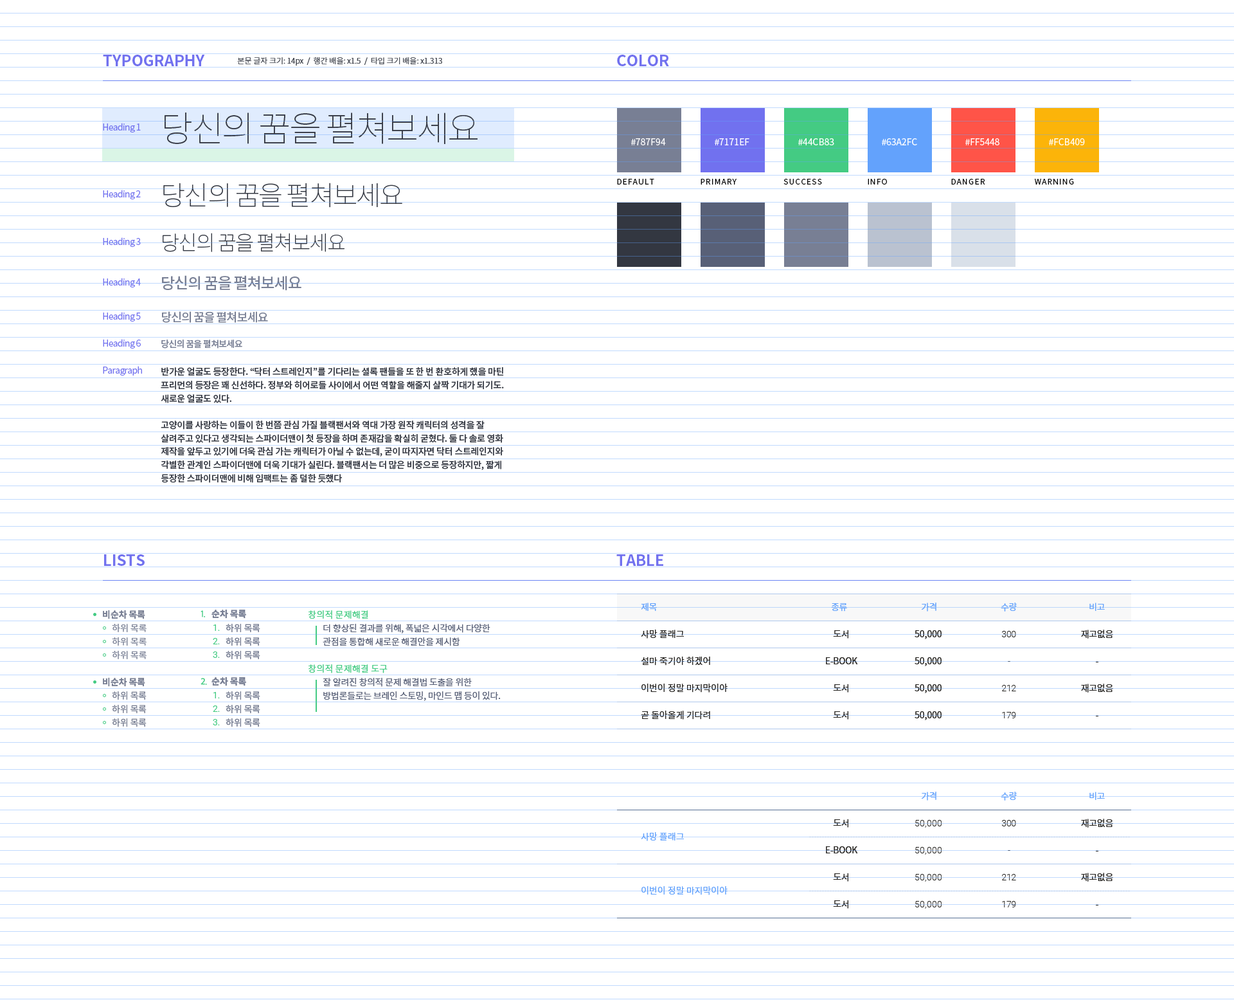
<style>
.page{position:relative;width:1234px;height:1000px;background:#ffffff}
.page>*{position:absolute;margin:0}
.t1{font:15.4px "SourceHanSansKR-Bold";letter-spacing:-0.01em;color:#7171ef}
.t2{font:7.7px "NotoSansCJKkr-Light";color:#333741}
.t3{font:35.1px "NotoSansCJKkr-Thin";letter-spacing:-0.05em;color:#333741}
.t4{font:9px "SourceHanSansKR-Regular";letter-spacing:-0.05em;color:#7171ef}
.t5{font:9px "NotoSansCJKkr-Regular";color:#ffffff;text-transform:uppercase}
.t6{font:26.8px "NotoSansCJKkr-Thin";letter-spacing:-0.05em;color:#333741}
.t7{font:7.7px "SourceHanSansKR-Regular";letter-spacing:0.1em;color:#000000}
.t8{font:7.7px "SourceHanSansKR-Regular";letter-spacing:0.1em;color:#000000;text-transform:uppercase}
.t9{font:20.4px "NotoSansCJKkr-Thin";letter-spacing:-0.05em;color:#333741}
.t10{font:15.5px "NotoSansCJKkr-Medium";letter-spacing:-0.05em;color:#787f94}
.t11{font:11.8px "NotoSansCJKkr-Medium";letter-spacing:-0.05em;color:#787f94}
.t12{font:9px "NotoSansCJKkr-Medium";letter-spacing:-0.05em;color:#787f94}
.t13{font:9px/13.3px "NotoSansCJKkr-Medium";letter-spacing:-0.02em;color:#333741}
.t14{font:9px "NotoSansCJKkr-Regular";letter-spacing:-0.025em;color:#63a2fc;text-transform:uppercase}
.t15{font:9px "SourceHanSansKR-Bold";letter-spacing:-0.01em;color:#787f94;text-transform:uppercase}
.t16{font:9px "AppleSDGothicNeo-Regular";letter-spacing:-0.01em;color:#44cb83;text-transform:uppercase}
.t17{font:9px "SpoqaHanSans-Bold";letter-spacing:-0.01em;color:#787f94;text-transform:uppercase}
.t18{font:9px "NotoSansCJKkr-Regular";letter-spacing:0.01em;color:#44cb83}
.t19{font:9px "NotoSansCJKkr-Regular";letter-spacing:-0.01em;color:#787f94;text-transform:uppercase}
.t20{font:9px "Roboto-Regular";letter-spacing:-0.025em;color:#44cb83;text-transform:uppercase}
.t21{font:9px "SpoqaHanSans-Regular";letter-spacing:-0.01em;color:#787f94;text-transform:uppercase}
.t22{font:9px "NotoSansCJKkr-Regular";letter-spacing:-0.02em;color:#586077}
.t23{font:9px "NotoSansCJKkr-Regular";color:#272522;text-transform:uppercase}
.t24{font:9px "NotoSansCJKkr-Regular";letter-spacing:-0.025em;color:#272522;text-transform:uppercase}
.t25{font:9px "Roboto-Light";letter-spacing:-0.025em;color:#272522;text-transform:uppercase}
.t26{font:9px "SourceHanSansKR-Regular";letter-spacing:-0.01em;color:#787f94;text-transform:uppercase}
.t27{font:9px "Roboto-Light";color:#272522;text-transform:uppercase}
.t28{font:9px "NotoSansCJKkr-Regular";color:#63a2fc;text-transform:uppercase}
</style>
<div class="page">
<p class="t1" style="left:103px;top:55px;width:102px;height:11px">TYPOGRAPHY</p>
<p class="t2" style="left:237px;top:57px;width:205px;height:9px">본문 글자 크기: 14px  /  행간 배율: x1.5  /  타입 크기 배율: x1.313</p>
<p class="t1" style="left:617px;top:55px;width:52px;height:11px">COLOR</p>
<p class="t3" style="left:165px;top:113px;width:313px;height:31px">당신의 꿈을 펼쳐보세요</p>
<p class="t4" style="left:103px;top:123px;width:38px;height:9px">Heading 1</p>
<p class="t5" style="left:631px;top:138px;width:35px;height:7px">#787f94</p>
<p class="t5" style="left:715px;top:138px;width:35px;height:7px">#7171ef</p>
<p class="t5" style="left:798px;top:138px;width:36px;height:7px">#44CB83</p>
<p class="t5" style="left:882px;top:138px;width:35px;height:7px">#63A2FC</p>
<p class="t5" style="left:966px;top:138px;width:34px;height:7px">#FF5448</p>
<p class="t5" style="left:1049px;top:138px;width:36px;height:7px">#FCB409</p>
<p class="t6" style="left:163px;top:183px;width:239px;height:25px">당신의 꿈을 펼쳐보세요</p>
<p class="t7" style="left:617px;top:179px;width:37px;height:5px">DEFAULT</p>
<p class="t8" style="left:701px;top:179px;width:36px;height:5px">primary</p>
<p class="t8" style="left:784px;top:179px;width:38px;height:5px">SUCCESS</p>
<p class="t8" style="left:868px;top:179px;width:19px;height:5px">INFO</p>
<p class="t8" style="left:951px;top:179px;width:35px;height:5px">DANGER</p>
<p class="t8" style="left:1034px;top:179px;width:40px;height:5px">WARNING</p>
<p class="t4" style="left:103px;top:190px;width:38px;height:9px">Heading 2</p>
<p class="t9" style="left:163px;top:233px;width:182px;height:19px">당신의 꿈을 펼쳐보세요</p>
<p class="t4" style="left:103px;top:237px;width:38px;height:10px">Heading 3</p>
<p class="t4" style="left:103px;top:278px;width:38px;height:9px">Heading 4</p>
<p class="t10" style="left:162px;top:275px;width:140px;height:16px">당신의 꿈을 펼쳐보세요</p>
<p class="t4" style="left:103px;top:312px;width:38px;height:9px">Heading 5</p>
<p class="t11" style="left:162px;top:311px;width:106px;height:12px">당신의 꿈을 펼쳐보세요</p>
<p class="t4" style="left:103px;top:339px;width:38px;height:9px">Heading 6</p>
<p class="t12" style="left:161px;top:339px;width:81px;height:9px">당신의 꿈을 펼쳐보세요</p>
<p class="t4" style="left:103px;top:366px;width:39px;height:9px">Paragraph</p>
<p class="t13" style="left:161px;top:367px;width:343px;height:116px">반가운 얼굴도 등장한다. “닥터 스트레인지”를 기다리는 셜록 팬들을 또 한 번 환호하게 했을 마틴 프리먼의 등장은 꽤 신선하다. 정부와 히어로들 사이에서 어떤 역할을 해줄지 살짝 기대가 되기도. 새로운 얼굴도 있다.<br> <br>고양이를 사랑하는 이들이 한 번쯤 관심 가질 블랙팬서와 역대 가장 원작 캐릭터의 성격을 잘 살려주고 있다고 생각되는 스파이더맨이 첫 등장을 하며 존재감을 확실히 굳혔다. 둘 다 솔로 영화 제작을 앞두고 있기에 더욱 관심 가는 캐릭터가 아닐 수 없는데, 굳이 따지자면 닥터 스트레인지와 각별한 관계인 스파이더맨에 더욱 기대가 실린다. 블랙팬서는 더 많은 비중으로 등장하지만, 짧게 등장한 스파이더맨에 비해 임팩트는 좀 덜한 듯했다</p>
<p class="t1" style="left:104px;top:554px;width:41px;height:12px">LISTS</p>
<p class="t1" style="left:616px;top:554px;width:47px;height:12px">TABLE</p>
<p class="t14" style="left:641px;top:602px;width:16px;height:9px">제목</p>
<p class="t14" style="left:831px;top:603px;width:16px;height:8px">종류</p>
<p class="t14" style="left:921px;top:602px;width:16px;height:9px">가격</p>
<p class="t14" style="left:1001px;top:602px;width:16px;height:9px">수량</p>
<p class="t14" style="left:1090px;top:602px;width:15px;height:9px">비고</p>
<p class="t15" style="left:103px;top:609px;width:42px;height:10px">비순차 목록</p>
<p class="t16" style="left:201px;top:610px;width:4px;height:7px">1.</p>
<p class="t17" style="left:212px;top:609px;width:34px;height:9px">순차 목록</p>
<p class="t18" style="left:309px;top:610px;width:59px;height:9px">창의적 문제해결</p>
<p class="t19" style="left:112px;top:624px;width:35px;height:35px">하위 목록<br>하위 목록<br>하위 목록</p>
<p class="t20" style="left:213px;top:624px;width:7px;height:34px">1.<br>2.<br>3.</p>
<p class="t21" style="left:226px;top:624px;width:34px;height:35px">하위 목록<br>하위 목록<br>하위 목록</p>
<p class="t22" style="left:323px;top:624px;width:168px;height:22px">더 향상된 결과를 위해, 폭넓은 시각에서 다양한 관점을 통합해 새로운 해결안을 제시함</p>
<p class="t23" style="left:641px;top:629px;width:87px;height:90px">사망 플래그<br>설마 죽기야 하겠어<br>이번이 정말 마지막이야<br>곧 돌아올게 기다려</p>
<p class="t24" style="left:826px;top:629px;width:32px;height:90px;text-align:center">도서<br>e-book<br>도서<br>도서</p>
<p class="t23" style="left:915px;top:630px;width:27px;height:90px">50,000<br>50,000<br>50,000<br>50,000</p>
<p class="t24" style="left:1081px;top:629px;width:32px;height:87px;text-align:center">재고없음<br>-<br>재고없음<br>-</p>
<p class="t25" style="left:1002px;top:631px;width:14px;height:87px;text-align:center">300<br>-<br>212<br>179</p>
<p class="t18" style="left:309px;top:664px;width:79px;height:9px">창의적 문제해결 도구</p>
<p class="t15" style="left:103px;top:677px;width:42px;height:10px">비순차 목록</p>
<p class="t16" style="left:201px;top:678px;width:6px;height:7px">2.</p>
<p class="t17" style="left:212px;top:676px;width:34px;height:10px">순차 목록</p>
<p class="t22" style="left:323px;top:678px;width:178px;height:23px">잘 알려진 창의적 문제 해결법 도출을 위한 방법론들로는 브레인 스토밍, 마인드 맵 등이 있다.</p>
<p class="t26" style="left:112px;top:691px;width:35px;height:35px">하위 목록<br>하위 목록<br>하위 목록</p>
<p class="t20" style="left:213px;top:692px;width:7px;height:33px">1.<br>2.<br>3.</p>
<p class="t21" style="left:226px;top:691px;width:34px;height:35px">하위 목록<br>하위 목록<br>하위 목록</p>
<p class="t14" style="left:921px;top:791px;width:16px;height:9px">가격</p>
<p class="t14" style="left:1001px;top:791px;width:16px;height:9px">수량</p>
<p class="t14" style="left:1090px;top:791px;width:15px;height:9px">비고</p>
<p class="t24" style="left:826px;top:818px;width:32px;height:90px;text-align:center">도서<br>e-book<br>도서<br>도서</p>
<p class="t27" style="left:915px;top:820px;width:27px;height:88px">50,000<br>50,000<br>50,000<br>50,000</p>
<p class="t25" style="left:1002px;top:820px;width:14px;height:87px;text-align:center">300<br>-<br>212<br>179</p>
<p class="t24" style="left:1081px;top:818px;width:32px;height:87px;text-align:center">재고없음<br>-<br>재고없음<br>-</p>
<p class="t28" style="left:641px;top:832px;width:87px;height:63px">사망 플래그<br><br>이번이 정말 마지막이야</p>
</div>
